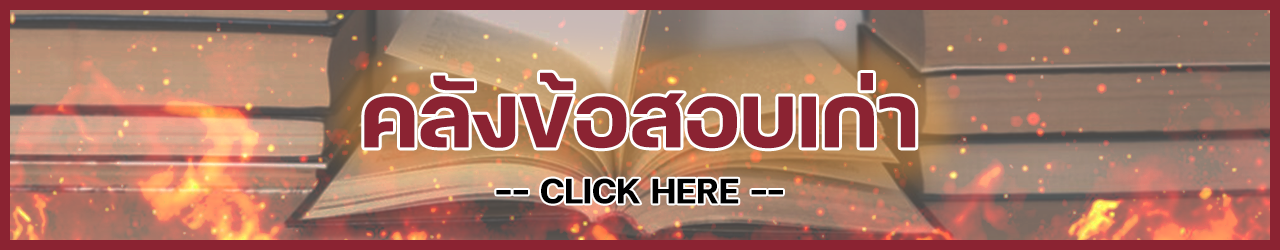
<style>
.page{position:relative;width:1280px;height:250px}
.page>*{position:absolute;margin:0}
.t1{font:120px "FCMinimalBold";color:#8b2332}
.t2{font:48px "FCMinimalBold";color:#000000}
</style>
<div class="page">
<p class="t1" style="left:364px;top:72px;width:552px;height:77px">คลังข้อสอบเก่า</p>
<p class="t2" style="left:496px;top:178px;width:287px;height:26px">-- CLICK HERE --</p>
</div>
